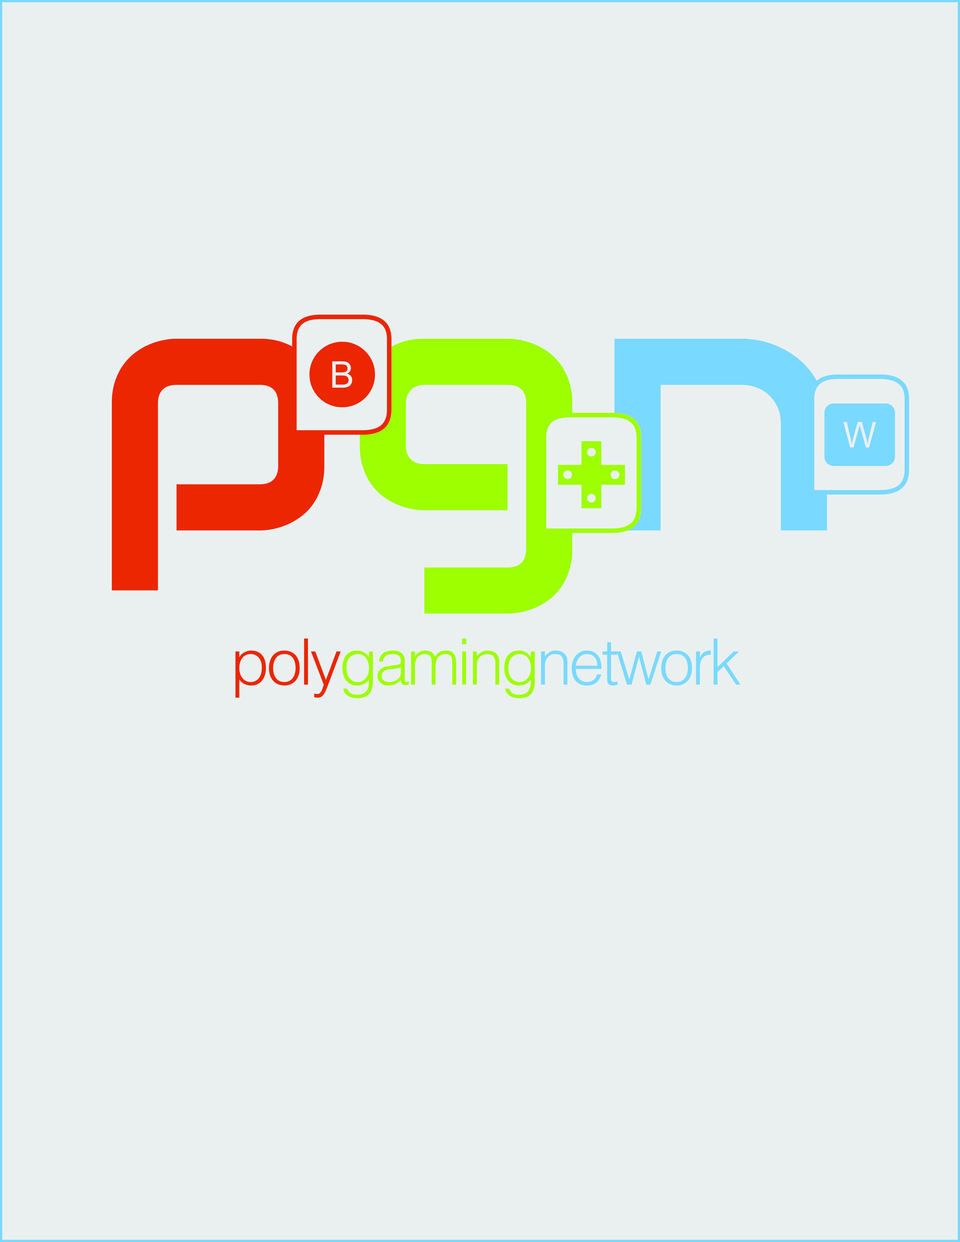
<style>
.page{position:relative;width:960px;height:1242px;background:#eaf0f0}
.page>*{position:absolute;margin:0}
.t1{font:64px "Helvetica-Light";letter-spacing:-0.05em;color:#7ad9ff}
.t2{font:64px "Helvetica-Light";letter-spacing:-0.05em;color:#eb2600}
.t3{font:64px "Helvetica-Light";letter-spacing:-0.05em;color:#9dff00}
</style>
<div class="page">
<p class="t1" style="left:235px;top:638px;width:505px;height:61px"><span class="t2">poly</span><span class="t3">gaming</span>network</p>
</div>
